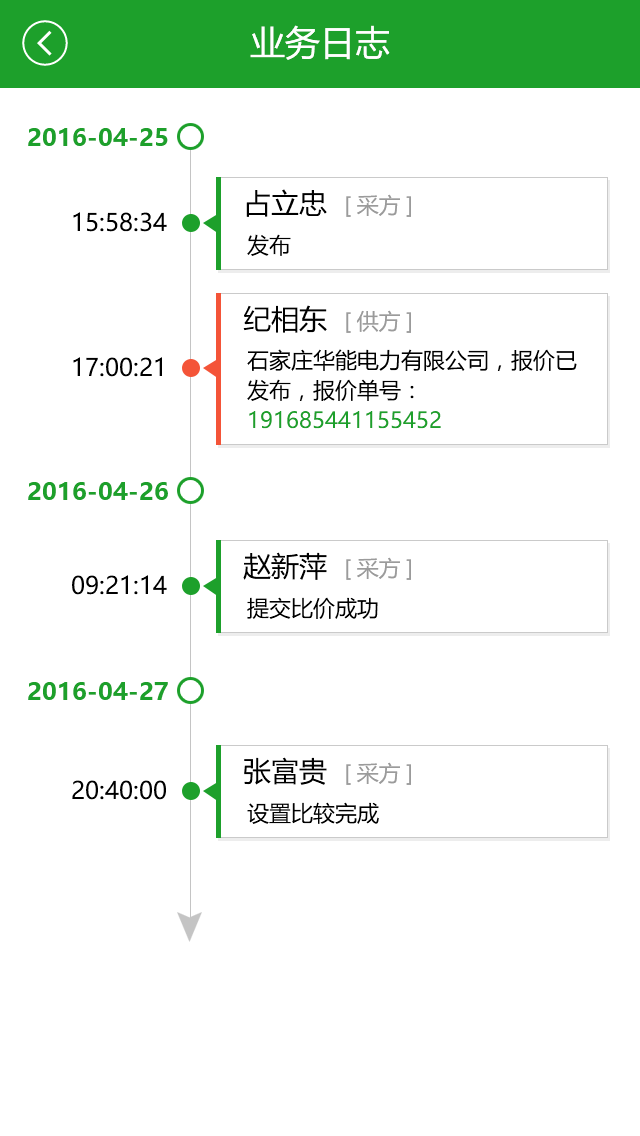
<style>
.page{position:relative;width:640px;height:1136px;background:#ffffff}
.page>*{position:absolute;margin:0}
.t1{font:35px "MicrosoftYaHei";color:#ffffff}
.t2{font:24px "MicrosoftYaHei-Bold";color:#1da02b}
.t3{font:28px "MicrosoftYaHei";color:#000000}
.t4{font:22px "MicrosoftYaHei";color:#9b9b9b}
.t5{font:24px "MicrosoftYaHei";color:#000000}
.t6{font:22px "MicrosoftYaHei";color:#000000}
.t7{font:22px/30px "MicrosoftYaHei";color:#000000}
.t8{font:22px/30px "MicrosoftYaHei";color:#1da02b}
</style>
<div class="page">
<p class="t1" style="left:250px;top:25px;width:140px;height:35px">业务日志</p>
<p class="t2" style="left:28px;top:128px;width:140px;height:18px">2016-04-25</p>
<p class="t3" style="left:246px;top:189px;width:81px;height:28px">占立忠</p>
<p class="t4" style="left:346px;top:194px;width:65px;height:23px">[采方]</p>
<p class="t5" style="left:73px;top:212px;width:94px;height:20px">15:58:34</p>
<p class="t6" style="left:247px;top:234px;width:44px;height:22px">发布</p>
<p class="t3" style="left:243px;top:305px;width:84px;height:28px">纪相东</p>
<p class="t4" style="left:346px;top:310px;width:65px;height:23px">[供方]</p>
<p class="t7" style="left:247px;top:349px;width:330px;height:80px">石家庄华能电力有限公司，报价已发布，报价单号：<span class="t8">191685441155452</span></p>
<p class="t5" style="left:73px;top:357px;width:89px;height:20px">17:00:21</p>
<p class="t2" style="left:28px;top:482px;width:140px;height:18px">2016-04-26</p>
<p class="t3" style="left:243px;top:552px;width:84px;height:28px">赵新萍</p>
<p class="t4" style="left:346px;top:557px;width:65px;height:23px">[采方]</p>
<p class="t5" style="left:72px;top:575px;width:95px;height:20px">09:21:14</p>
<p class="t6" style="left:247px;top:597px;width:131px;height:22px">提交比价成功</p>
<p class="t2" style="left:28px;top:682px;width:140px;height:18px">2016-04-27</p>
<p class="t3" style="left:244px;top:757px;width:83px;height:28px">张富贵</p>
<p class="t4" style="left:346px;top:762px;width:65px;height:23px">[采方]</p>
<p class="t5" style="left:72px;top:780px;width:94px;height:20px">20:40:00</p>
<p class="t6" style="left:247px;top:802px;width:132px;height:22px">设置比较完成</p>
</div>
